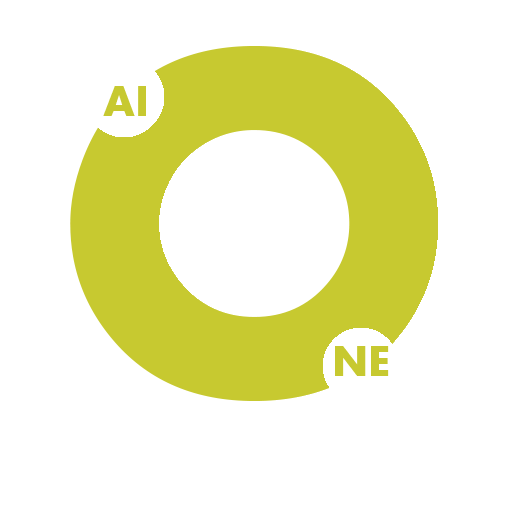
<style>
.page{position:relative;width:512px;height:512px;background:#ffffff}
.page>*{position:absolute;margin:0}
.t1{font:45px "AharoniBold";color:#c7c930}
</style>
<div class="page">
<p class="t1" style="left:103px;top:86px;width:43px;height:30px">AI</p>
<p class="t1" style="left:335px;top:346px;width:54px;height:30px">NE</p>
</div>
